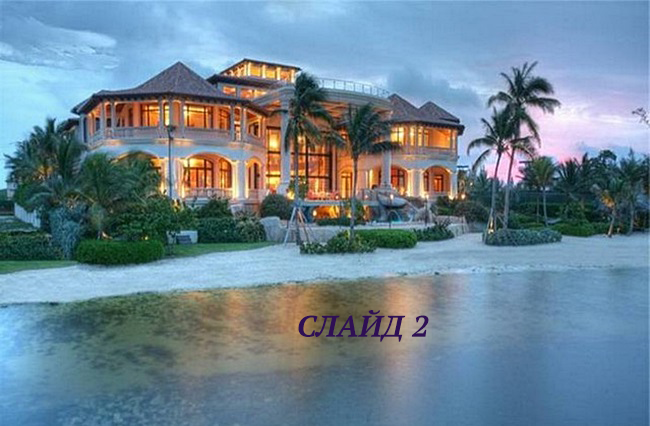
<style>
.page{position:relative;width:650px;height:426px}
.page>*{position:absolute;margin:0}
.t1{font:30px "PTSerif-BoldItalic";color:#2f0f55}
</style>
<div class="page">
<p class="t1" style="left:298px;top:310px;width:131px;height:32px">СЛАЙД 2</p>
</div>
